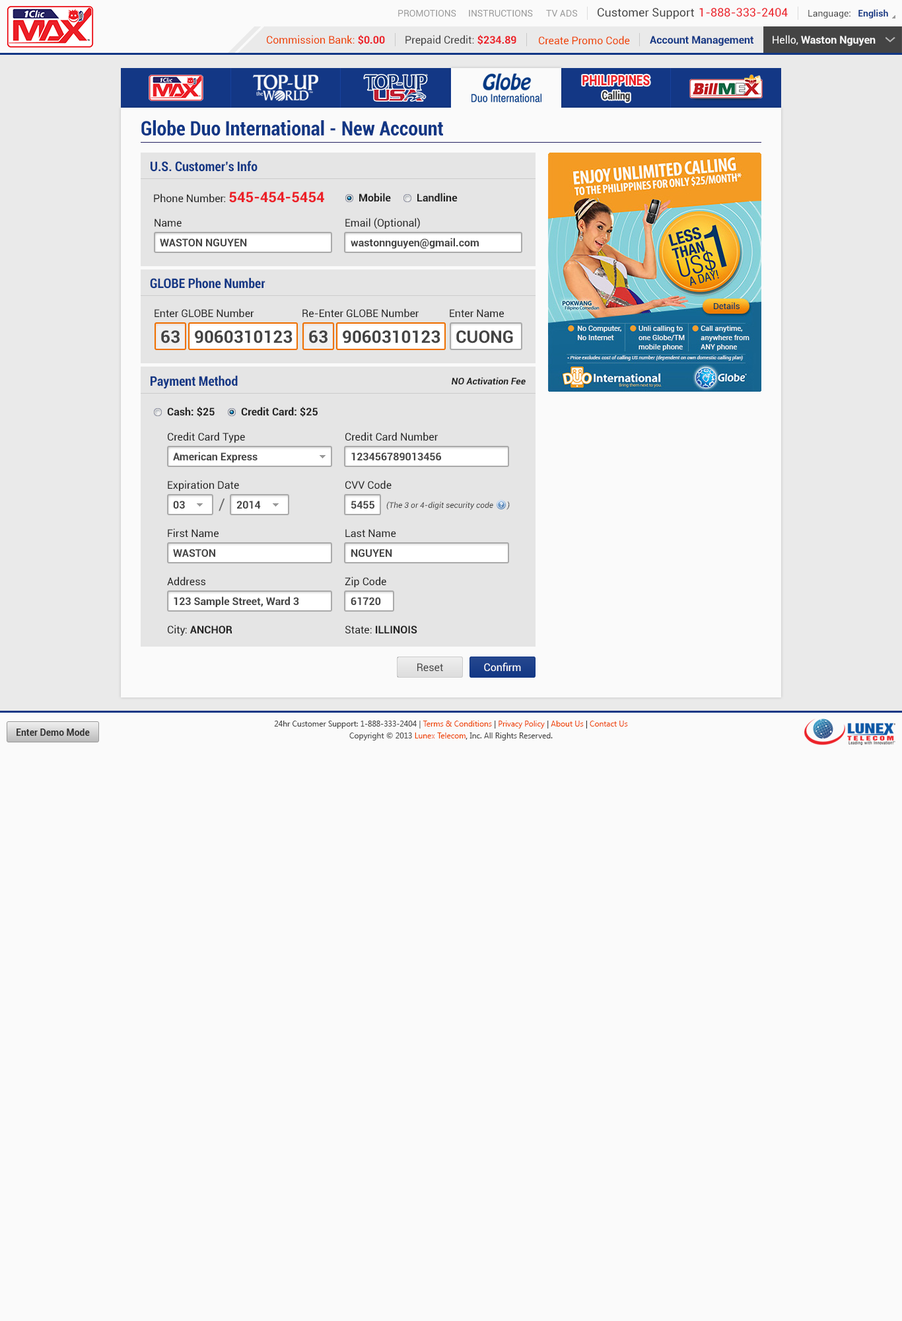
<style>
.page{position:relative;width:902px;height:1321px;background:#fafafa}
.page>*{position:absolute;margin:0}
.t1{font:9.2px "Roboto-Regular";color:#999999}
.t2{font:11.6px "Roboto-Regular";color:#444444}
.t3{font:11.6px "Roboto-Regular";color:#ec2029}
.t4{font:9.2px "Roboto-Regular";color:#444444}
.t5{font:9.2px "Roboto-Bold";color:#123785}
.t6{font:10.6px "Roboto-Regular";color:#ee4400}
.t7{font:10.6px "Roboto-Bold";color:#ec2028}
.t8{font:10.6px "Roboto-Regular";color:#444444}
.t9{font:10.6px "Roboto-Bold";color:#123785}
.t10{font:10.6px "Roboto-Bold";color:#fafafa}
.t11{font:10.6px "Roboto-Regular";color:#fafafa}
.t12{font:14.1px "Roboto-Black";color:#ec2028;scale:0.81 1}
.t13{font:11.3px "Roboto-Black";color:#333333;scale:0.81 1}
.t14{font:19.8px "Roboto-BoldCondensed";color:#123785}
.t15{font:13.2px "Roboto-BoldCondensed";color:#133785}
.t16{font:10.6px "Roboto-Regular";color:#222222}
.t17{font:14.5px "Roboto-Bold";color:#ec2028}
.t18{font:10.6px "Roboto-Bold";color:#222222}
.t19{font:10.6px "Roboto-Bold";color:#444444}
.t20{font:17.2px "Roboto-Bold";color:#444444}
.t21{font:9.2px "Roboto-BoldItalic";color:#222222}
.t22{font:15.9px "Roboto-Regular";color:#666666}
.t23{font:7.9px "Roboto-Italic";color:#444444}
.t24{font:10.6px "Roboto-Regular";color:#ffffff}
.t25{font:7.9px/11.9px "SegoeUI";color:#444444}
.t26{font:7.9px/11.9px "SegoeUI";color:#ee4400}
.t27{font:7.9px/11.9px "SegoeUI";color:#333333}
.t28{font:9.2px "Roboto-Bold";color:#333333}
</style>
<div class="page">
<p class="t1" style="left:398px;top:10px;width:59px;height:7px">PROMOTIONS</p>
<p class="t1" style="left:469px;top:10px;width:64px;height:7px">INSTRUCTIONS</p>
<p class="t1" style="left:546px;top:10px;width:31px;height:7px">TV ADS</p>
<p class="t2" style="left:598px;top:8px;width:96px;height:11px">Customer Support</p>
<p class="t3" style="left:700px;top:8px;width:88px;height:9px">1-888-333-2404</p>
<p class="t4" style="left:809px;top:9px;width:80px;height:9px">Language:   <span class="t5">English</span></p>
<p class="t6" style="left:267px;top:35px;width:118px;height:10px">Commission Bank: <span class="t7">$0.00</span></p>
<p class="t8" style="left:406px;top:35px;width:111px;height:11px">Prepaid Credit: <span class="t7">$234.89</span></p>
<p class="t6" style="left:539px;top:36px;width:91px;height:9px">Create Promo Code</p>
<p class="t9" style="left:650px;top:36px;width:104px;height:10px">Account Management</p>
<p class="t10" style="left:773px;top:35px;width:103px;height:11px"><span class="t11">Hello, </span>Waston Nguyen</p>
<p class="t12" style="left:583px;top:75px;width:67px;height:11px">PHILIPPINES</p>
<p class="t13" style="left:603px;top:91px;width:27px;height:11px">Calling</p>
<p class="t14" style="left:141px;top:120px;width:302px;height:16px">Globe Duo International - New Account</p>
<p class="t15" style="left:151px;top:161px;width:107px;height:11px">U.S. Customer’s Info</p>
<p class="t16" style="left:154px;top:192px;width:170px;height:11px">Phone Number: <span class="t17">545-454-5454</span></p>
<p class="t18" style="left:359px;top:193px;width:32px;height:9px">Mobile</p>
<p class="t18" style="left:418px;top:193px;width:40px;height:9px">Landline</p>
<p class="t16" style="left:155px;top:219px;width:27px;height:8px">Name</p>
<p class="t16" style="left:346px;top:217px;width:74px;height:12px">Email (Optional)</p>
<p class="t19" style="left:160px;top:238px;width:87px;height:8px">WASTON NGUYEN</p>
<p class="t19" style="left:351px;top:238px;width:128px;height:11px">wastonnguyen@gmail.com</p>
<p class="t15" style="left:150px;top:277px;width:116px;height:12px">GLOBE Phone Number</p>
<p class="t16" style="left:155px;top:309px;width:99px;height:9px">Enter GLOBE Number</p>
<p class="t16" style="left:303px;top:309px;width:116px;height:9px">Re-Enter GLOBE Number</p>
<p class="t16" style="left:450px;top:309px;width:54px;height:9px">Enter Name</p>
<p class="t20" style="left:161px;top:330px;width:19px;height:14px">63</p>
<p class="t20" style="left:195px;top:330px;width:98px;height:14px">9060310123</p>
<p class="t20" style="left:309px;top:330px;width:19px;height:14px">63</p>
<p class="t20" style="left:343px;top:330px;width:98px;height:14px">9060310123</p>
<p class="t20" style="left:457px;top:330px;width:56px;height:14px">CUONG</p>
<p class="t15" style="left:151px;top:375px;width:87px;height:14px">Payment Method</p>
<p class="t21" style="left:452px;top:377px;width:74px;height:8px">NO Activation Fee</p>
<p class="t18" style="left:167px;top:407px;width:48px;height:10px">Cash: $25</p>
<p class="t18" style="left:241px;top:407px;width:77px;height:10px">Credit Card: $25</p>
<p class="t16" style="left:168px;top:432px;width:77px;height:11px">Credit Card Type</p>
<p class="t16" style="left:346px;top:432px;width:92px;height:9px">Credit Card Number</p>
<p class="t19" style="left:173px;top:452px;width:85px;height:11px">American Express</p>
<p class="t19" style="left:351px;top:453px;width:90px;height:7px">123456789013456</p>
<p class="t16" style="left:168px;top:480px;width:71px;height:12px">Expiration Date</p>
<p class="t16" style="left:346px;top:480px;width:46px;height:9px">CVV Code</p>
<p class="t19" style="left:173px;top:501px;width:12px;height:8px">03</p>
<p class="t22" style="left:219px;top:498px;width:6px;height:13px">/</p>
<p class="t19" style="left:237px;top:501px;width:24px;height:8px">2014</p>
<p class="t19" style="left:351px;top:501px;width:24px;height:8px">5455</p>
<p class="t23" style="left:386px;top:501px;width:124px;height:9px">(The 3 or 4-digit security code       )</p>
<p class="t16" style="left:168px;top:529px;width:51px;height:9px">First Name</p>
<p class="t16" style="left:346px;top:529px;width:50px;height:9px">Last Name</p>
<p class="t19" style="left:173px;top:549px;width:42px;height:8px">WASTON</p>
<p class="t19" style="left:351px;top:549px;width:41px;height:8px">NGUYEN</p>
<p class="t16" style="left:167px;top:577px;width:38px;height:8px">Address</p>
<p class="t16" style="left:345px;top:577px;width:41px;height:11px">Zip Code</p>
<p class="t19" style="left:174px;top:597px;width:125px;height:11px">123 Sample Street, Ward 3</p>
<p class="t19" style="left:351px;top:597px;width:30px;height:8px">61720</p>
<p class="t18" style="left:168px;top:625px;width:65px;height:11px"><span class="t16">City: </span>ANCHOR</p>
<p class="t18" style="left:346px;top:626px;width:72px;height:8px"><span class="t16">State: </span>ILLINOIS</p>
<p class="t8" style="left:418px;top:663px;width:25px;height:8px">Reset</p>
<p class="t24" style="left:484px;top:663px;width:37px;height:8px">Confirm</p>
<p class="t25" style="left:274px;top:721px;width:354px;height:20px;text-align:center">24hr Customer Support: 1-888-333-2404 | <span class="t26">Terms &amp; Conditions</span><span class="t27"> | </span><span class="t26">Privacy Policy</span><span class="t27"> | </span><span class="t26">About Us</span><span class="t27"> | </span><span class="t26">Contact Us<br></span>Copyright © 2013 <span class="t26">Lunex Telecom</span><span class="t27">,</span> Inc. All Rights Reserved.</p>
<p class="t28" style="left:17px;top:729px;width:73px;height:7px">Enter Demo Mode</p>
</div>
